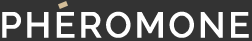
<style>
.page{position:relative;width:252px;height:41px;background:#333333}
.page>*{position:absolute;margin:0}
.t1{font:36px "Raleway-SemiBold";letter-spacing:0.075em;color:#ffffff;text-transform:uppercase}
</style>
<div class="page">
<p class="t1" style="left:2px;top:11px;width:247px;height:27px">pheromone</p>
</div>
